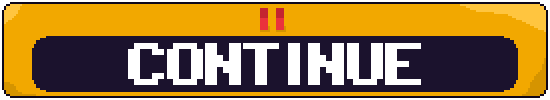
<style>
.page{position:relative;width:550px;height:100px;background:#1b122d}
.page>*{position:absolute;margin:0}
.t1{font:48px "PixelOperator8-Bold";letter-spacing:-0.2em;color:#ffffff}
</style>
<div class="page">
<p class="t1" style="left:128px;top:43px;width:293px;height:42px">CONTINUE</p>
</div>
